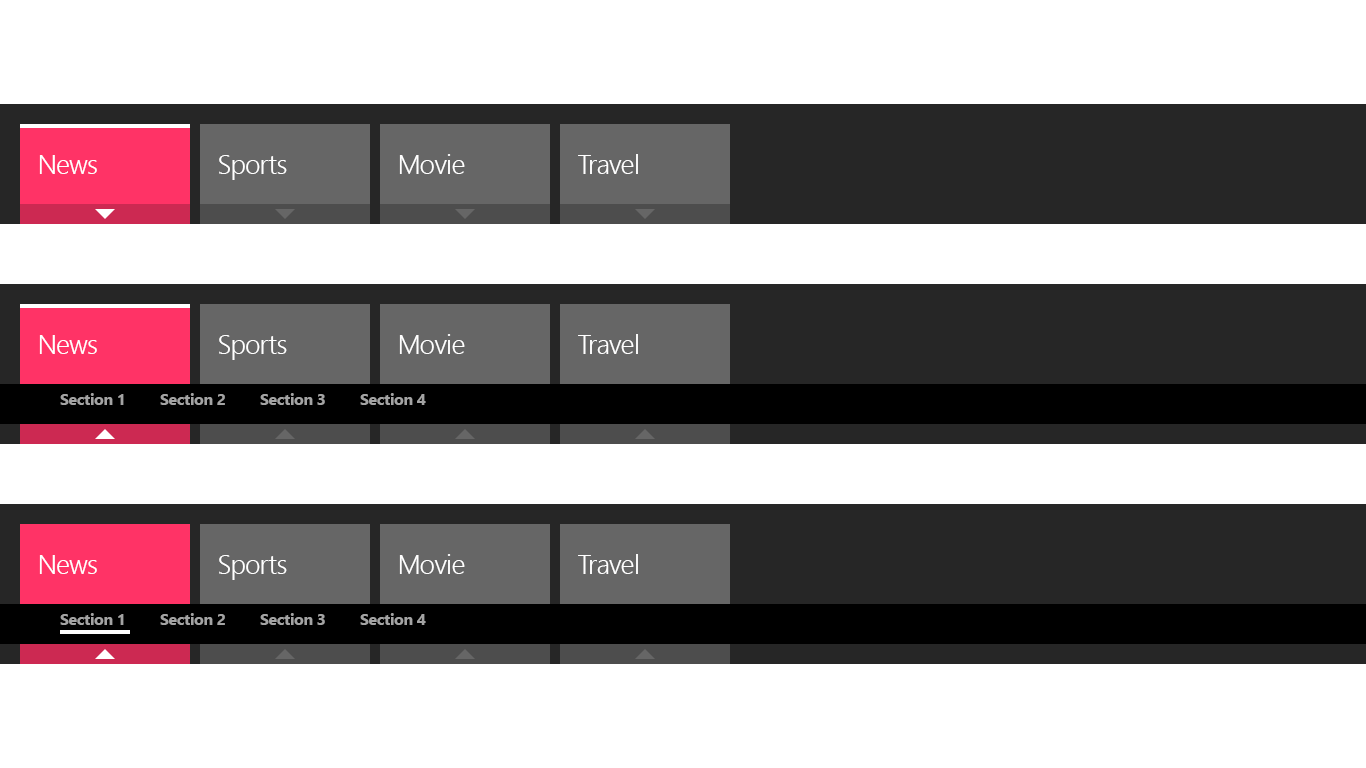
<style>
.page{position:relative;width:1366px;height:768px;background:#ffffff}
.page>*{position:absolute;margin:0}
.t1{font:26.7px "SegoeUI-Semilight";letter-spacing:-0.025em;color:#ffffff}
.t2{font:16px "SegoeUI-Bold";letter-spacing:-0.025em;color:#a3a3a3}
</style>
<div class="page">
<p class="t1" style="left:39px;top:155px;width:58px;height:19px">News</p>
<p class="t1" style="left:219px;top:155px;width:68px;height:25px">Sports</p>
<p class="t1" style="left:399px;top:154px;width:66px;height:20px">Movie</p>
<p class="t1" style="left:578px;top:154px;width:60px;height:20px">Travel</p>
<p class="t1" style="left:39px;top:335px;width:58px;height:19px">News</p>
<p class="t1" style="left:219px;top:335px;width:68px;height:25px">Sports</p>
<p class="t1" style="left:399px;top:334px;width:66px;height:20px">Movie</p>
<p class="t1" style="left:578px;top:334px;width:60px;height:20px">Travel</p>
<p class="t2" style="left:60px;top:393px;width:64px;height:12px">Section 1</p>
<p class="t2" style="left:160px;top:393px;width:65px;height:12px">Section 2</p>
<p class="t2" style="left:260px;top:393px;width:65px;height:12px">Section 3</p>
<p class="t2" style="left:360px;top:393px;width:66px;height:12px">Section 4</p>
<p class="t1" style="left:39px;top:555px;width:58px;height:19px">News</p>
<p class="t1" style="left:219px;top:555px;width:68px;height:25px">Sports</p>
<p class="t1" style="left:399px;top:554px;width:66px;height:20px">Movie</p>
<p class="t1" style="left:578px;top:554px;width:60px;height:20px">Travel</p>
<p class="t2" style="left:60px;top:613px;width:64px;height:12px">Section 1</p>
<p class="t2" style="left:160px;top:613px;width:65px;height:12px">Section 2</p>
<p class="t2" style="left:260px;top:613px;width:65px;height:12px">Section 3</p>
<p class="t2" style="left:360px;top:613px;width:66px;height:12px">Section 4</p>
</div>
